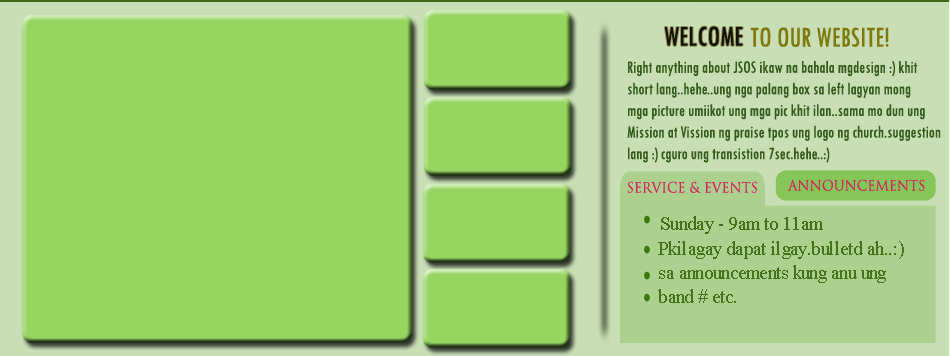
<style>
.page{position:relative;width:950px;height:356px;background:#95d560}
.page>*{position:absolute;margin:0}
.t1{font:30px "TwCenMT-Condensed";color:#141309;scale:0.93 1}
.t2{font:30px "TwCenMT-Condensed";color:#80790e;scale:0.93 1}
.t3{font:18px "TwCenMT-Condensed";color:#345b1a;scale:0.93 1}
.t4{font:14px "TrajanPro-Regular";color:#d02662;scale:0.93 1}
.t5{font:20px "TimesNewRomanPSMT";color:#446f1a;scale:0.93 1}
.t6{font:20px "TimesNewRomanPSMT";color:#43731a;scale:0.93 1}
</style>
<div class="page">
<p class="t1" style="left:664px;top:26px;width:79px;height:20px">WELCOME</p>
<p class="t2" style="left:750px;top:27px;width:139px;height:20px">TO OUR WEBSITE!</p>
<p class="t3" style="left:627px;top:61px;width:314px;height:102px">Right anything about JSOS ikaw na bahala mgdesign :) khit <br>short lang..hehe..ung nga palang box sa left lagyan mong<br>mga picture umiikot ung mga pic khit ilan..sama mo dun ung <br>Mission at Vission ng praise tpos ung logo ng church.suggestion<br>lang :) cguro ung transistion 7sec.hehe..:)</p>
<p class="t4" style="left:627px;top:181px;width:130px;height:12px">SERVICE &amp; EVENTS</p>
<p class="t4" style="left:787px;top:179px;width:138px;height:12px">ANNOUNCEMENTS</p>
<p class="t5" style="left:661px;top:216px;width:162px;height:18px">Sunday - 9am to 11am</p>
<p class="t6" style="left:658px;top:241px;width:246px;height:62px">Pkilagay dapat ilgay.bulletd ah..:)<br>sa announcements kung anu ung <br>band # etc.</p>
</div>
